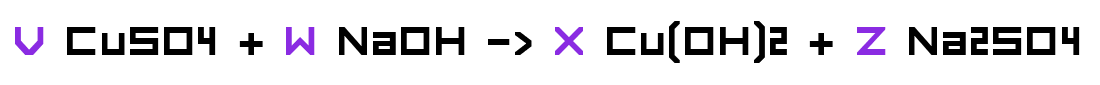
<style>
.page{position:relative;width:1100px;height:85px;background:#ffffff}
.page>*{position:absolute;margin:0}
.t1{font:54px "FORCED-SQUARE";color:#000000}
.t2{font:54px "FORCED-SQUARE";color:#8a2be2}
</style>
<div class="page">
<p class="t1" style="left:15px;top:21px;width:1065px;height:42px"><span class="t2">V</span> CuSO4 + <span class="t2">W </span>NaOH -&gt; <span class="t2">X</span> Cu(OH)2 + <span class="t2">Z </span>Na2SO4</p>
</div>
